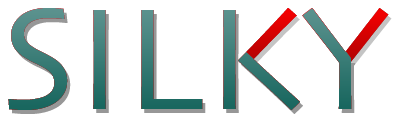
<style>
.page{position:relative;width:401px;height:114px;background:#ffffff}
.page>*{position:absolute;margin:0}
.t1{font:152px "Skia-Regular"}
</style>
<div class="page">
<p class="t1" style="left:8px;top:8px;width:381px;height:102px">SILKY</p>
</div>
